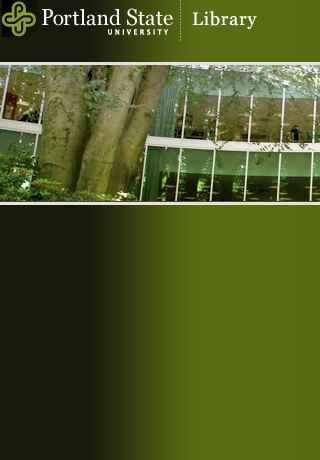
<style>
.page{position:relative;width:320px;height:460px;background:#596b13}
.page>*{position:absolute;margin:0}
.t1{font:21px "Georgia";color:#fcfcfc}
.t2{font:23.1px "Georgia";letter-spacing:-0.05em;color:#fcfcfc;scale:0.91 1}
.t3{font:21px "Georgia";letter-spacing:-0.05em;color:#fcfcfc}
.t4{font:21px "Georgia";letter-spacing:0.025em;color:#fcfcfc}
.t5{font:23.1px "Georgia";color:#fcfcfc;scale:0.91 1}
.t6{font:18px "Georgia";letter-spacing:0.05em;color:#fcfcfc}
.t7{font:8px "Candara-Bold";letter-spacing:0.32em;color:#fcfcfc;scale:0.9 1}
</style>
<div class="page">
<p class="t1" style="left:42px;top:8px;width:131px;height:18px"><span class="t2">P</span><span class="t3">o</span><span class="t4">rt</span>land <span class="t5">S</span>tate</p>
<p class="t6" style="left:192px;top:11px;width:65px;height:18px">Library</p>
<p class="t7" style="left:108px;top:29px;width:60px;height:6px">UNIVERSITY</p>
</div>
